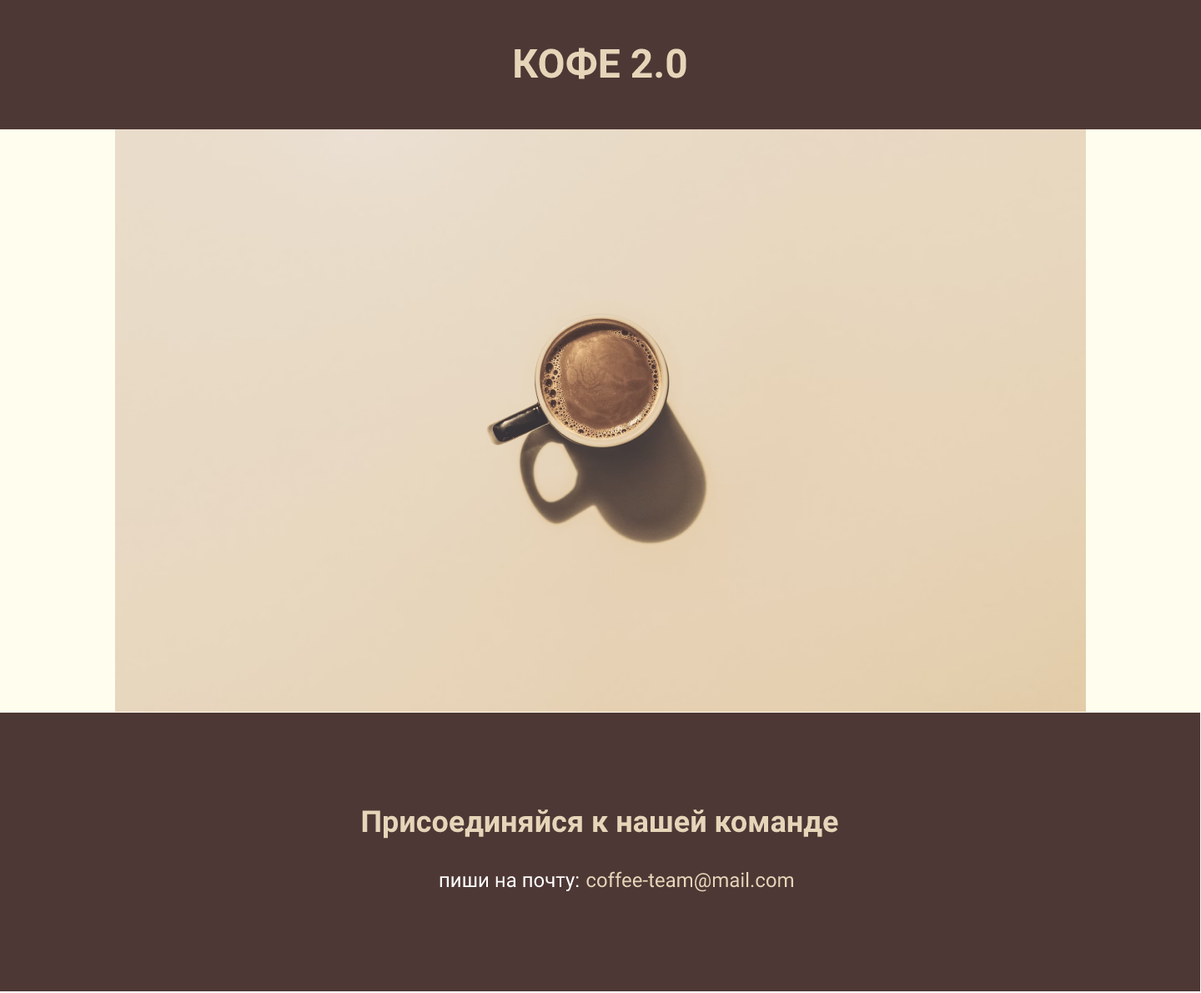
<style>
.page{position:relative;width:1201px;height:993px;background:#4e3835}
.page>*{position:absolute;margin:0}
.t1{font:40px "Roboto-Bold";color:#e6d5b9;text-transform:uppercase}
.t2{font:30px "Roboto-Bold";color:#e6d5b9}
.t3{font:20px "Roboto-Regular";color:#ffffff}
.t4{font:20px "Roboto-Regular";color:#e6d5b9}
</style>
<div class="page">
<p class="t1" style="left:515px;top:48px;width:172px;height:31px">КОФЕ 2.0</p>
<p class="t2" style="left:362px;top:809px;width:476px;height:29px">Присоединяйся к нашей команде</p>
<p class="t3" style="left:440px;top:876px;width:139px;height:16px">пиши на почту:</p>
<p class="t4" style="left:586px;top:871px;width:207px;height:21px">coffee-team@mail.com</p>
</div>
